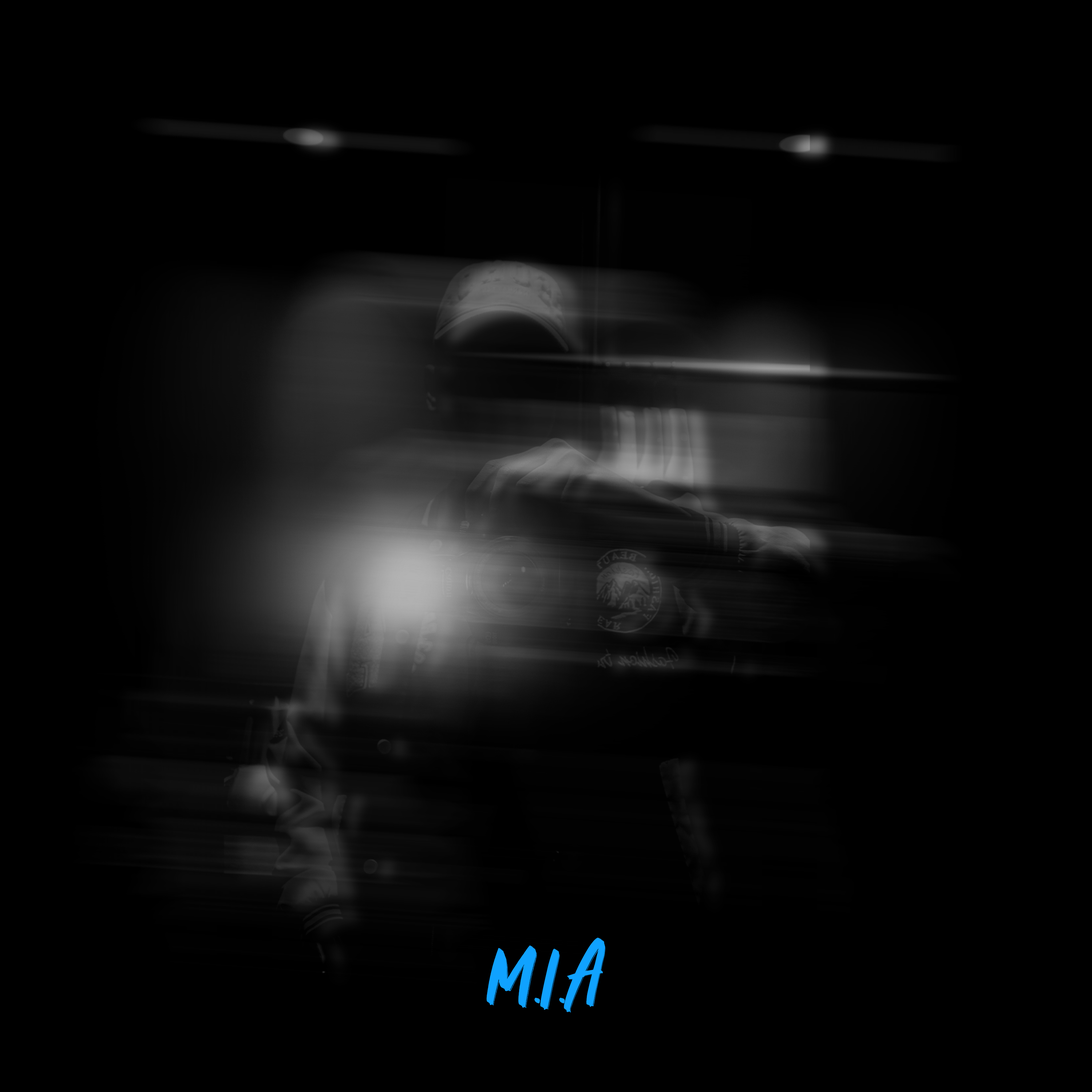
<style>
.page{position:relative;width:1092px;height:1092px;background:#000000}
.page>*{position:absolute;margin:0}
.t1{font:115.5px "MathewRohas";color:#10a2ff;text-transform:uppercase}
</style>
<div class="page">
<p class="t1" style="left:486px;top:938px;width:119px;height:75px">M.I.A</p>
</div>
